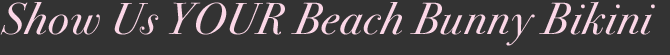
<style>
.page{position:relative;width:670px;height:55px;background:#333333}
.page>*{position:absolute;margin:0}
.t1{font:45px "BodoniSvtyTwoITCTTBookIta";letter-spacing:0.025em;color:#fbd7e7}
</style>
<div class="page">
<p class="t1" style="left:0px;top:1px;width:655px;height:45px">Show Us YOUR Beach Bunny Bikini</p>
</div>
